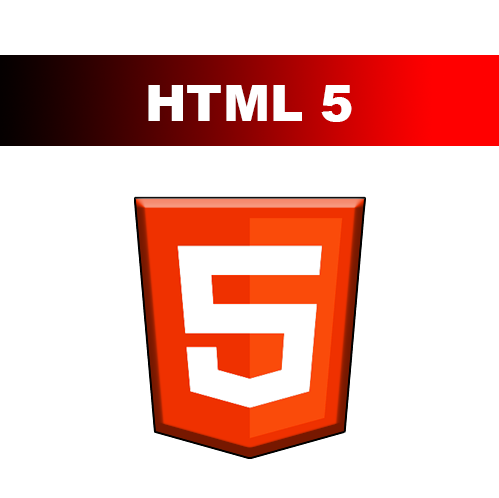
<style>
.page{position:relative;width:499px;height:498px;background:#ffffff}
.page>*{position:absolute;margin:0}
.t1{font:50px "Arial-Black";color:#ffffff}
</style>
<div class="page">
<p class="t1" style="left:148px;top:85px;width:204px;height:37px">HTML 5</p>
</div>
